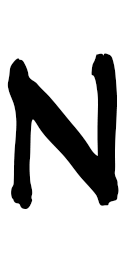
<style>
.page{position:relative;width:128px;height:256px;background:#ffffff}
.page>*{position:absolute;margin:0}
.t1{font:250px "AB-fudeshichi";letter-spacing:0.42em;color:#000000;scale:0.7 1}
</style>
<div class="page">
<p class="t1" style="left:7px;top:53px;width:112px;height:156px">N</p>
</div>
